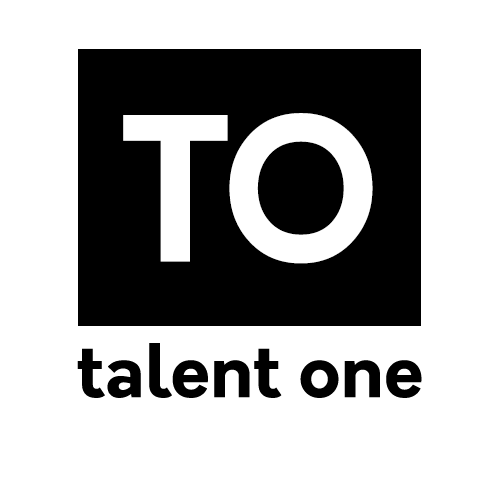
<style>
.page{position:relative;width:500px;height:500px;background:#ffffff}
.page>*{position:absolute;margin:0}
.t1{font:194.8px "Orkney-Bold";color:#ffffff}
.t2{font:72px "Orkney-Bold";color:#000000}
</style>
<div class="page">
<p class="t1" style="left:123px;top:113px;width:250px;height:151px">TO</p>
<p class="t2" style="left:77px;top:343px;width:345px;height:55px">talent one</p>
</div>
